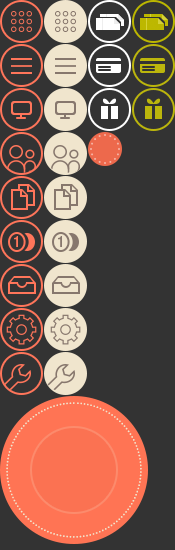
<style>
.page{position:relative;width:175px;height:550px;background:#333333}
.page>*{position:absolute;margin:0}
.t1{font:12px/25.1px "Scada-Regular";letter-spacing:0.075em;color:#f0e5ce;text-transform:uppercase}
</style>
<div class="page">
<p class="t1" style="left:6px;top:402px;width:136px;height:136px;text-align:right">.................................................................................................................................</p>
</div>
